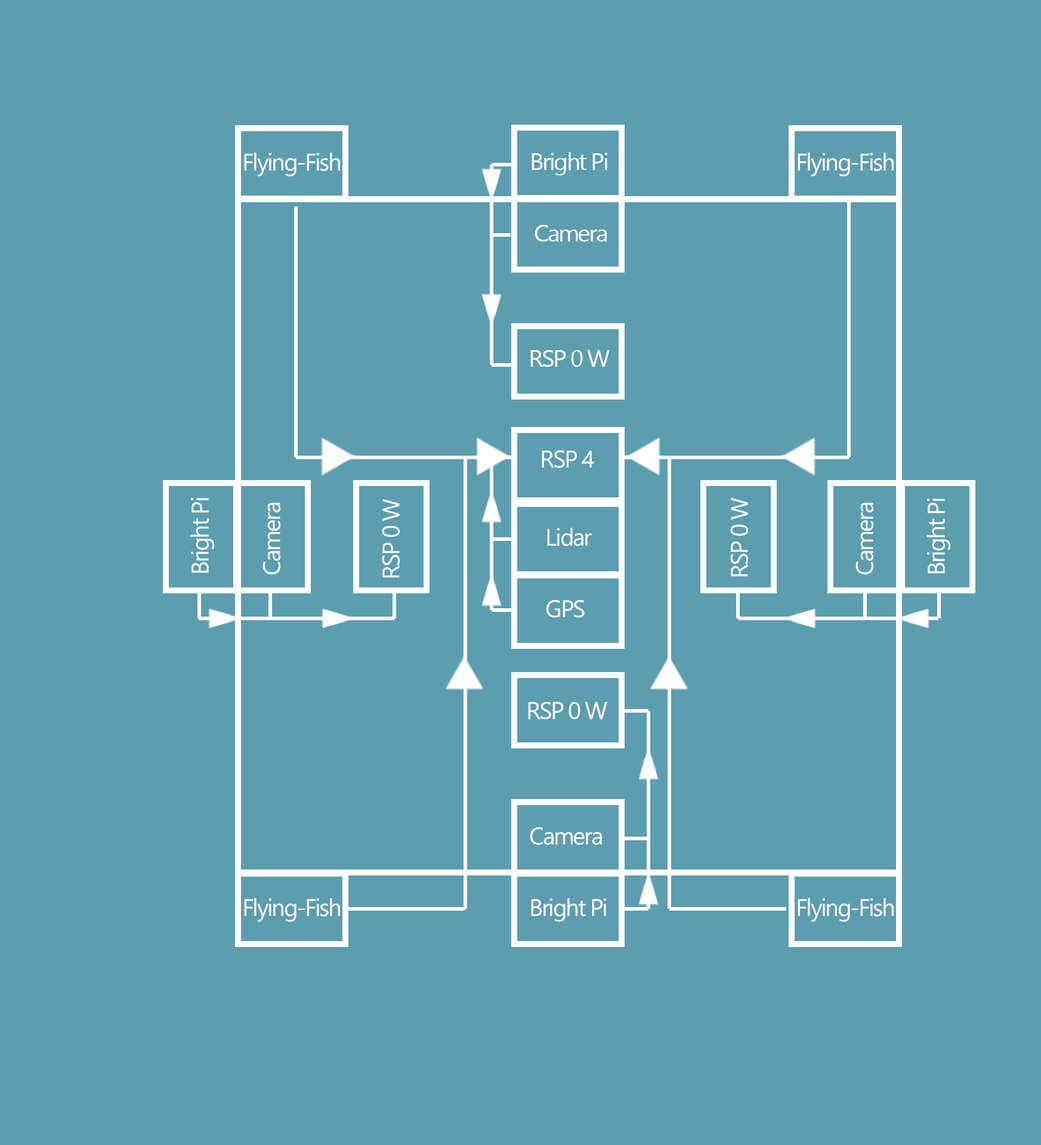
<style>
.page{position:relative;width:1041px;height:1145px;background:#5c9db0}
.page>*{position:absolute;margin:0}
.t1{font:24.1px "Gadugi";letter-spacing:-0.06em;color:#ffffff}
.t2{font:24.2px "Gadugi";letter-spacing:-0.06em;color:#ffffff}
</style>
<div class="page">
<p class="t1" style="left:244px;top:153px;width:96px;height:24px">Flying-Fish</p>
<p class="t1" style="left:532px;top:152px;width:76px;height:23px">Bright Pi</p>
<p class="t1" style="left:798px;top:153px;width:96px;height:24px">Flying-Fish</p>
<p class="t1" style="left:535px;top:225px;width:72px;height:17px">Camera</p>
<p class="t1" style="left:530px;top:350px;width:80px;height:17px">RSP 0 W</p>
<p class="t2" style="left:542px;top:450px;width:52px;height:18px">RSP 4</p>
<p class="t1" style="left:730px;top:498px;width:18px;height:79px;rotate:-90deg">RSP 0 W</p>
<p class="t1" style="left:190px;top:498px;width:24px;height:75px;rotate:-90deg">Bright Pi</p>
<p class="t1" style="left:262px;top:503px;width:18px;height:72px;rotate:-90deg">Camera</p>
<p class="t1" style="left:382px;top:499px;width:18px;height:79px;rotate:-90deg">RSP 0 W</p>
<p class="t1" style="left:855px;top:503px;width:18px;height:72px;rotate:-90deg">Camera</p>
<p class="t1" style="left:926px;top:499px;width:24px;height:75px;rotate:-90deg">Bright Pi</p>
<p class="t2" style="left:547px;top:528px;width:45px;height:18px">Lidar</p>
<p class="t2" style="left:546px;top:600px;width:39px;height:18px">GPS</p>
<p class="t2" style="left:528px;top:702px;width:79px;height:17px">RSP 0 W</p>
<p class="t1" style="left:530px;top:827px;width:72px;height:18px">Camera</p>
<p class="t1" style="left:244px;top:898px;width:96px;height:24px">Flying-Fish</p>
<p class="t1" style="left:531px;top:898px;width:75px;height:24px">Bright Pi</p>
<p class="t1" style="left:798px;top:898px;width:96px;height:24px">Flying-Fish</p>
</div>
